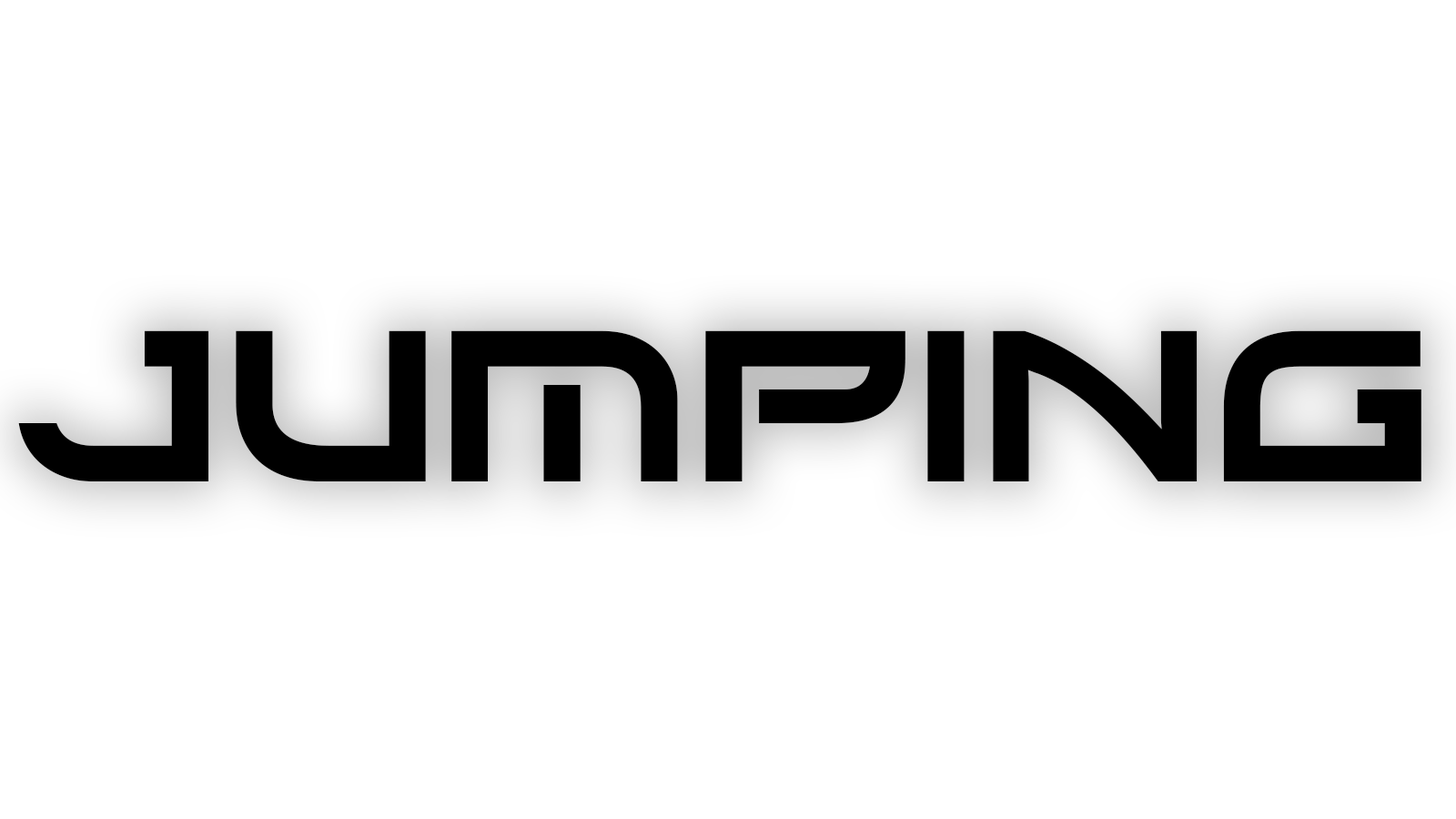
<style>
.page{position:relative;width:1456px;height:819px;background:#ffffff}
.page>*{position:absolute;margin:0}
.t1{font:214.9px "Xirod-Regular";color:#000000}
</style>
<div class="page">
<p class="t1" style="left:18px;top:330px;width:1403px;height:151px">jumping</p>
</div>
